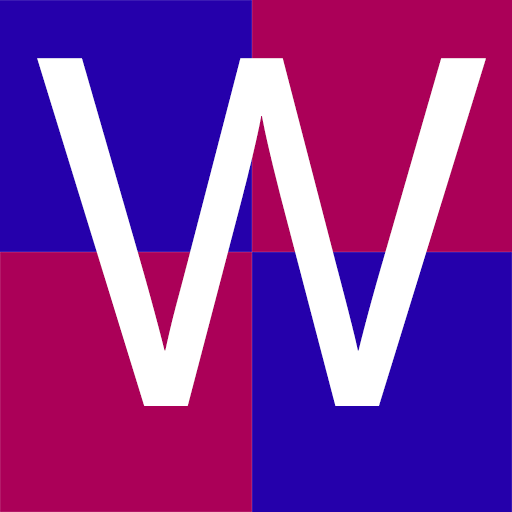
<style>
.page{position:relative;width:512px;height:512px;background:#2500ab}
.page>*{position:absolute;margin:0}
.t1{font:532px "Corbel";color:#ffffff}
</style>
<div class="page">
<p class="t1" style="left:37px;top:58px;width:449px;height:348px">W</p>
</div>
